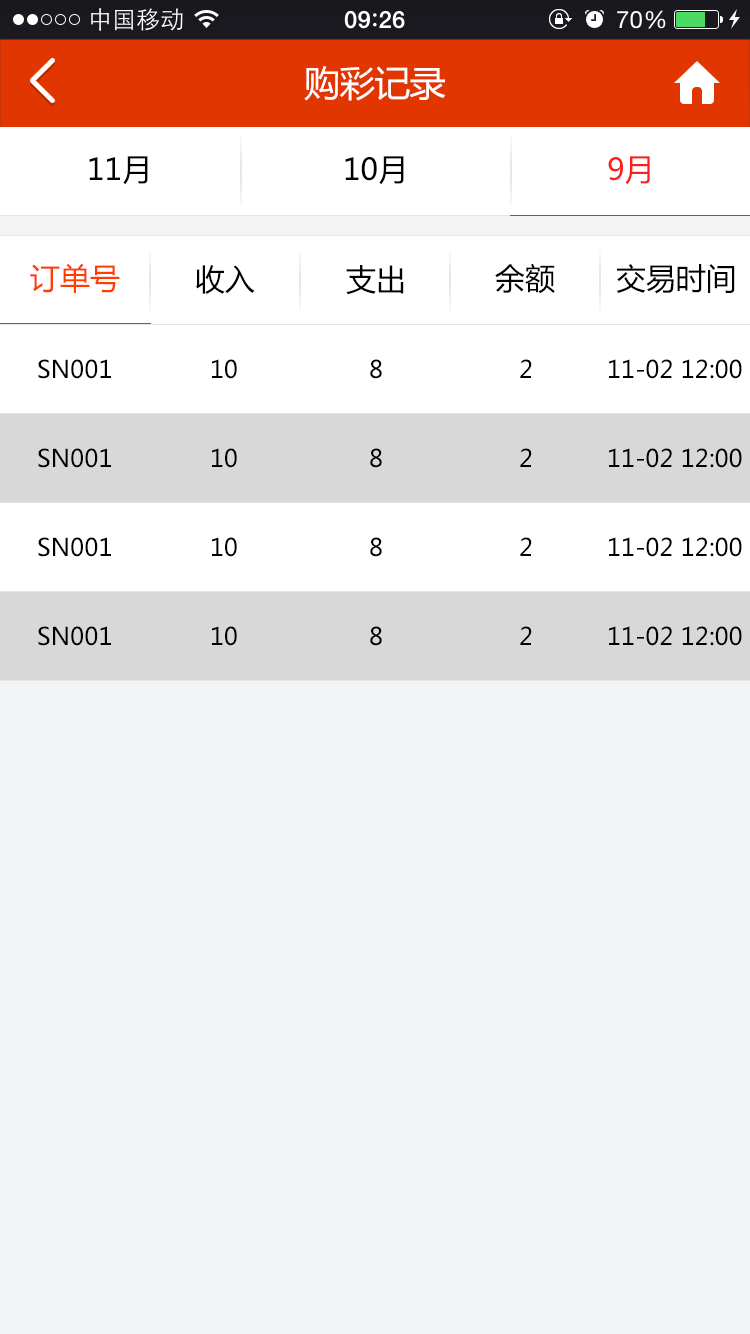
<style>
.page{position:relative;width:750px;height:1334px;background:#f2f3f5}
.page>*{position:absolute;margin:0}
.t1{font:36px "MicrosoftYaHei";letter-spacing:-0.025em;color:#ffffff}
.t2{font:30px "MicrosoftYaHei";color:#000000}
.t3{font:30px "MicrosoftYaHei";color:#ff1d1d}
.t4{font:30px "MicrosoftYaHei";color:#ff3d00}
.t5{font:24px "MicrosoftYaHei";color:#000000}
</style>
<div class="page">
<p class="t1" style="left:304px;top:66px;width:142px;height:35px">购彩记录</p>
<p class="t2" style="left:89px;top:156px;width:59px;height:29px">11月</p>
<p class="t2" style="left:345px;top:156px;width:59px;height:29px">10月</p>
<p class="t3" style="left:608px;top:156px;width:42px;height:29px">9月</p>
<p class="t4" style="left:30px;top:263px;width:90px;height:30px">订单号</p>
<p class="t2" style="left:196px;top:265px;width:59px;height:29px">收入</p>
<p class="t2" style="left:346px;top:265px;width:58px;height:30px">支出</p>
<p class="t2" style="left:495px;top:263px;width:60px;height:31px">余额</p>
<p class="t2" style="left:616px;top:264px;width:119px;height:30px">交易时间</p>
<p class="t5" style="left:38px;top:359px;width:73px;height:20px">SN001</p>
<p class="t5" style="left:212px;top:359px;width:25px;height:20px">10</p>
<p class="t5" style="left:370px;top:359px;width:12px;height:20px">8</p>
<p class="t5" style="left:520px;top:359px;width:12px;height:19px">2</p>
<p class="t5" style="left:609px;top:359px;width:133px;height:20px">11-02 12:00</p>
<p class="t5" style="left:38px;top:448px;width:73px;height:20px">SN001</p>
<p class="t5" style="left:212px;top:448px;width:25px;height:20px">10</p>
<p class="t5" style="left:370px;top:448px;width:12px;height:20px">8</p>
<p class="t5" style="left:520px;top:448px;width:12px;height:19px">2</p>
<p class="t5" style="left:609px;top:448px;width:133px;height:20px">11-02 12:00</p>
<p class="t5" style="left:38px;top:537px;width:73px;height:20px">SN001</p>
<p class="t5" style="left:212px;top:537px;width:25px;height:20px">10</p>
<p class="t5" style="left:370px;top:537px;width:12px;height:20px">8</p>
<p class="t5" style="left:520px;top:537px;width:12px;height:19px">2</p>
<p class="t5" style="left:609px;top:537px;width:133px;height:20px">11-02 12:00</p>
<p class="t5" style="left:38px;top:626px;width:73px;height:20px">SN001</p>
<p class="t5" style="left:212px;top:626px;width:25px;height:20px">10</p>
<p class="t5" style="left:370px;top:626px;width:12px;height:20px">8</p>
<p class="t5" style="left:520px;top:626px;width:12px;height:19px">2</p>
<p class="t5" style="left:609px;top:626px;width:133px;height:20px">11-02 12:00</p>
</div>
